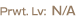
<style>
.page{position:relative;width:77px;height:20px;background:#ffffff}
.page>*{position:absolute;margin:0}
.t1{font:12px "GothicMB101Pro-DeBold";letter-spacing:-0.04em;color:#8b6e51}
.t2{font:10px "GothicMB101Pro-DeBold";letter-spacing:-0.04em;color:#8b6e51}
</style>
<div class="page">
<p class="t1" style="left:52px;top:5px;width:24px;height:11px;opacity:0.9">N/A</p>
<p class="t2" style="left:0px;top:7px;width:46px;height:9px;opacity:0.9">Prwt. Lv:</p>
</div>
